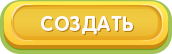
<style>
.page{position:relative;width:172px;height:54px}
.page>*{position:absolute;margin:0}
.t1{font:20.6px "RotondaC-Bold";letter-spacing:0.04em;color:#ffffff;text-transform:uppercase}
</style>
<div class="page">
<p class="t1" style="left:41px;top:16px;width:92px;height:19px">Создать</p>
</div>
